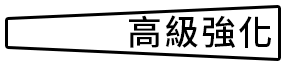
<style>
.page{position:relative;width:286px;height:66px;background:#ffffff}
.page>*{position:absolute;margin:0}
.t1{font:35px "NotoSansCJKtc-Medium";letter-spacing:0.06em;color:#000000}
</style>
<div class="page">
<p class="t1" style="left:129px;top:15px;width:142px;height:33px">高級強化</p>
</div>
